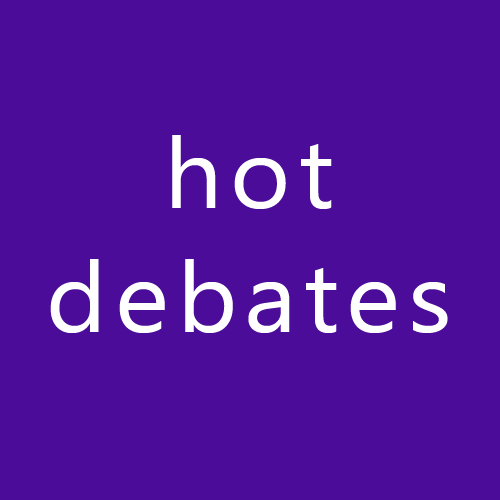
<style>
.page{position:relative;width:500px;height:500px;background:#4b0d99}
.page>*{position:absolute;margin:0}
.t1{font:98.1px "SegoeUI";letter-spacing:0.075em;color:#ffffff;scale:1.05 1}
</style>
<div class="page">
<p class="t1" style="left:50px;top:135px;width:398px;height:198px;text-align:center">hot<br>debates</p>
</div>
